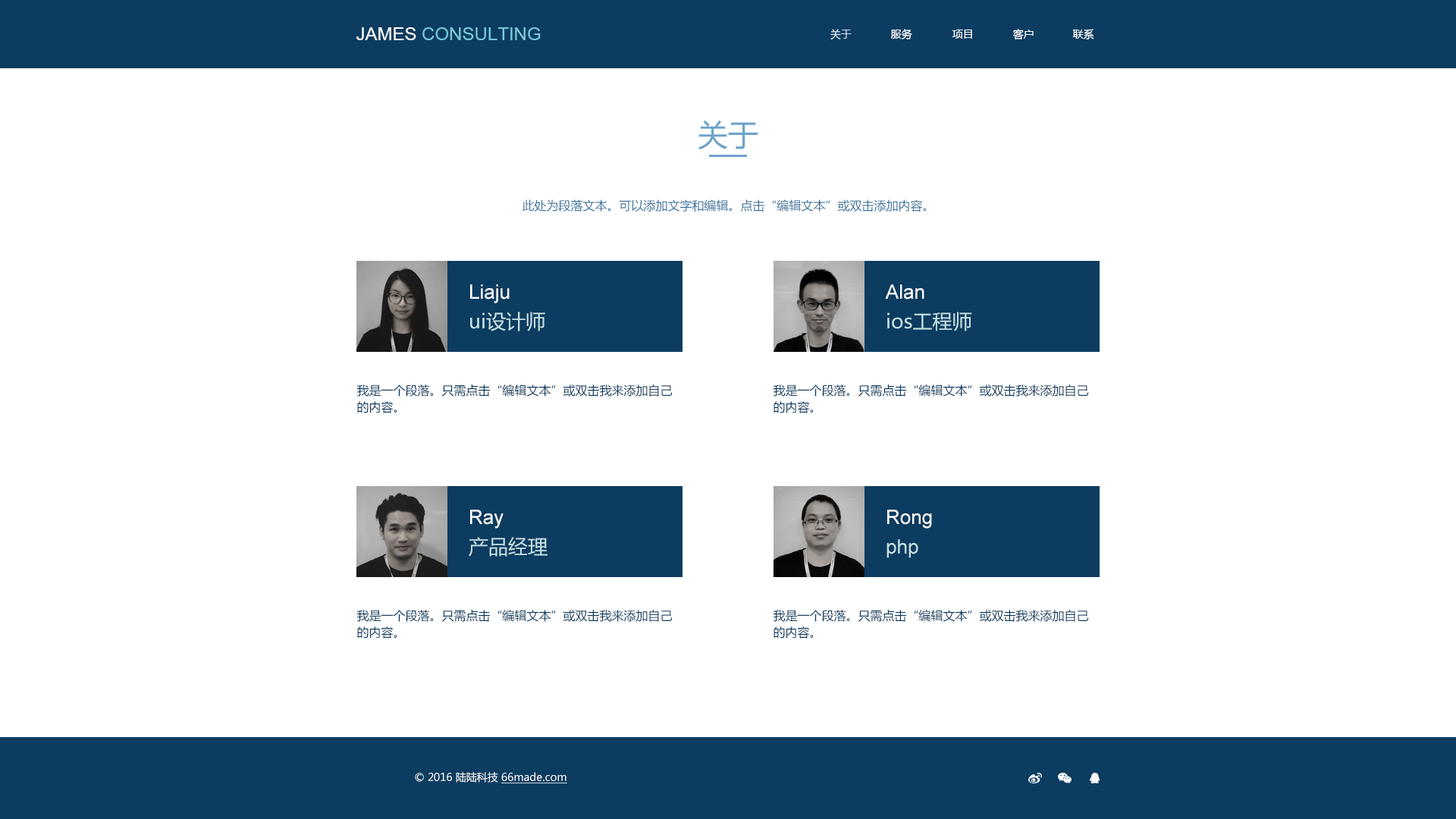
<style>
.page{position:relative;width:1456px;height:819px;background:#ffffff}
.page>*{position:absolute;margin:0}
.t1{font:18.2px "ArialMT";color:#79cada}
.t2{font:18.2px "ArialMT";color:#ffffff}
.t3{font:10.6px "MicrosoftYaHei";color:#d1e0eb}
.t4{font:10.6px "MicrosoftYaHei";color:#ffffff}
.t5{font:30.3px "MicrosoftYaHei";color:#6ea4ca}
.t6{font:12.1px "MicrosoftYaHei";color:#39729b}
.t7{font:19.7px "ArialMT";color:#feffff}
.t8{font:19.7px "MicrosoftYaHei";color:#c4e0e2}
.t9{font:12.1px/16.7px "MicrosoftYaHei";color:#0c3c60}
.t10{font:19.7px "ArialMT";color:#c4e0e2}
.t11{font:10.6px "MicrosoftYaHei";color:#ffffff;text-decoration:underline}
</style>
<div class="page">
<p class="t1" style="left:356px;top:27px;width:185px;height:13px"><span class="t2">JAMES </span>CONSULTING</p>
<p class="t3" style="left:830px;top:29px;width:22px;height:10px">关于</p>
<p class="t4" style="left:891px;top:29px;width:21px;height:10px">服务</p>
<p class="t4" style="left:952px;top:30px;width:20px;height:9px">项目</p>
<p class="t4" style="left:1013px;top:29px;width:21px;height:10px">客户</p>
<p class="t4" style="left:1072px;top:29px;width:22px;height:10px">联系</p>
<p class="t5" style="left:698px;top:120px;width:60px;height:30px">关于</p>
<p class="t6" style="left:522px;top:199px;width:405px;height:13px">此处为段落文本。可以添加文字和编辑。点击“编辑文本”或双击添加内容。</p>
<p class="t7" style="left:470px;top:284px;width:40px;height:19px">Liaju</p>
<p class="t7" style="left:885px;top:284px;width:39px;height:16px">Alan</p>
<p class="t8" style="left:470px;top:312px;width:75px;height:19px">ui设计师</p>
<p class="t8" style="left:887px;top:312px;width:85px;height:19px">ios工程师</p>
<p class="t9" style="left:356px;top:384px;width:317px;height:29px">我是一个段落。只需点击“编辑文本”或双击我来添加自己的内容。</p>
<p class="t9" style="left:773px;top:384px;width:316px;height:29px">我是一个段落。只需点击“编辑文本”或双击我来添加自己的内容。</p>
<p class="t7" style="left:470px;top:510px;width:34px;height:19px">Ray</p>
<p class="t7" style="left:887px;top:510px;width:45px;height:19px">Rong</p>
<p class="t8" style="left:469px;top:537px;width:79px;height:20px">产品经理</p>
<p class="t10" style="left:886px;top:539px;width:32px;height:19px">php</p>
<p class="t9" style="left:356px;top:610px;width:317px;height:29px">我是一个段落。只需点击“编辑文本”或双击我来添加自己的内容。</p>
<p class="t9" style="left:773px;top:610px;width:316px;height:29px">我是一个段落。只需点击“编辑文本”或双击我来添加自己的内容。</p>
<p class="t4" style="left:415px;top:772px;width:152px;height:11px">© 2016 陆陆科技 <span class="t11">66made.com</span></p>
</div>
